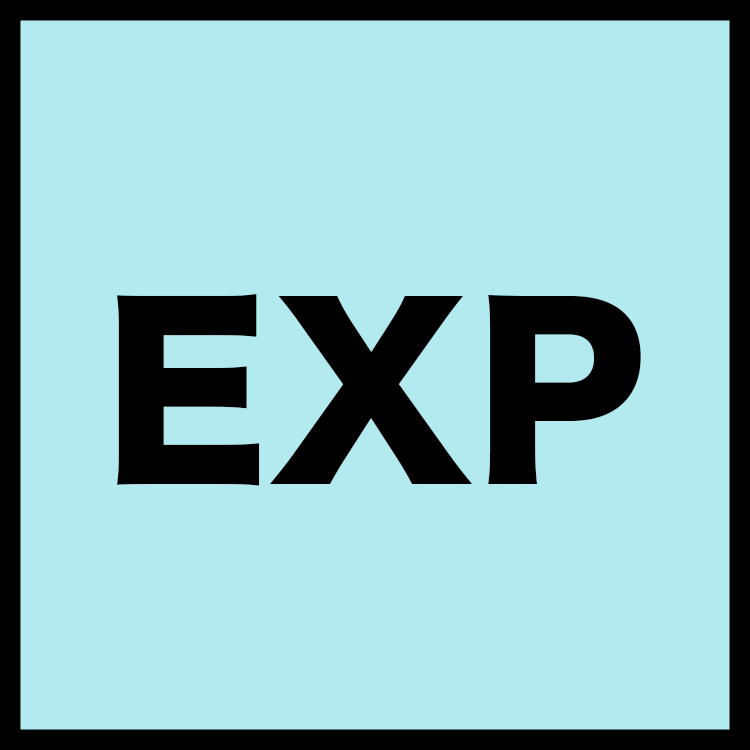
<style>
.page{position:relative;width:750px;height:750px;background:#b3eaf0}
.page>*{position:absolute;margin:0}
.t1{font:226.5px "HiraKakuStdN-W8";color:#000000}
</style>
<div class="page">
<p class="t1" style="left:117px;top:294px;width:524px;height:192px">EXP</p>
</div>
